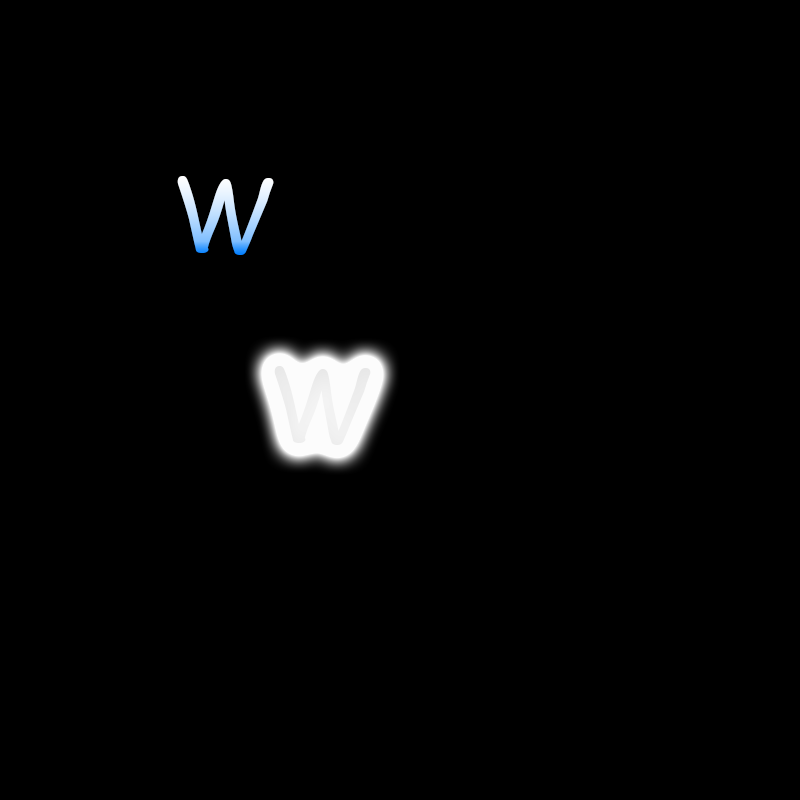
<style>
.page{position:relative;width:800px;height:800px;background:#000000}
.page>*{position:absolute;margin:0}
.t1{font:100px "ComicSansMS"}
</style>
<div class="page">
<p class="t1" style="left:177px;top:176px;width:97px;height:79px">W</p>
</div>
